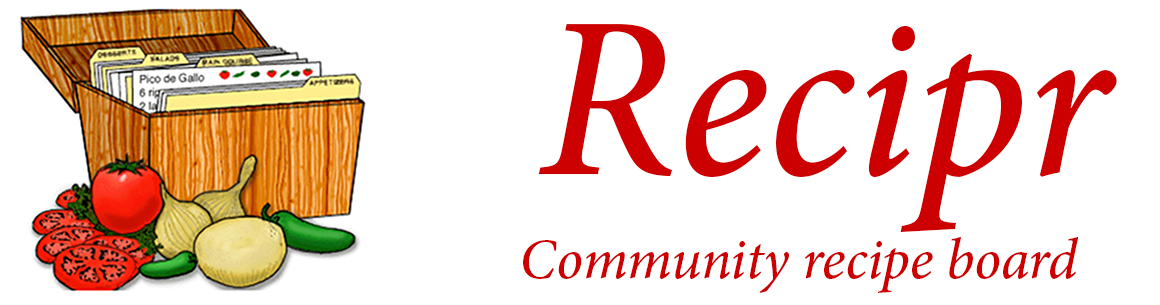
<style>
.page{position:relative;width:1160px;height:305px;background:#ffffff}
.page>*{position:absolute;margin:0}
.t1{font:230.2px "MinionPro-MediumIt";color:#cc0000}
.t2{font:57.5px "MinionPro-MediumIt";color:#cc0000}
</style>
<div class="page">
<p class="t1" style="left:538px;top:24px;width:579px;height:209px">Recipr</p>
<p class="t2" style="left:523px;top:237px;width:556px;height:56px">Community recipe board</p>
</div>
